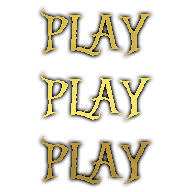
<style>
.page{position:relative;width:192px;height:192px;background:#ffffff}
.page>*{position:absolute;margin:0}
.t1{font:53px "AliceinWonderland";color:#d8bc4d}
.t2{font:53px "AliceinWonderland";color:#f4e46b}
.t3{font:53px "AliceinWonderland";color:#b7953a}
</style>
<div class="page">
<p class="t1" style="left:41px;top:8px;width:110px;height:48px">PLAY</p>
<p class="t2" style="left:41px;top:72px;width:110px;height:48px">PLAY</p>
<p class="t3" style="left:41px;top:136px;width:110px;height:48px">PLAY</p>
</div>
